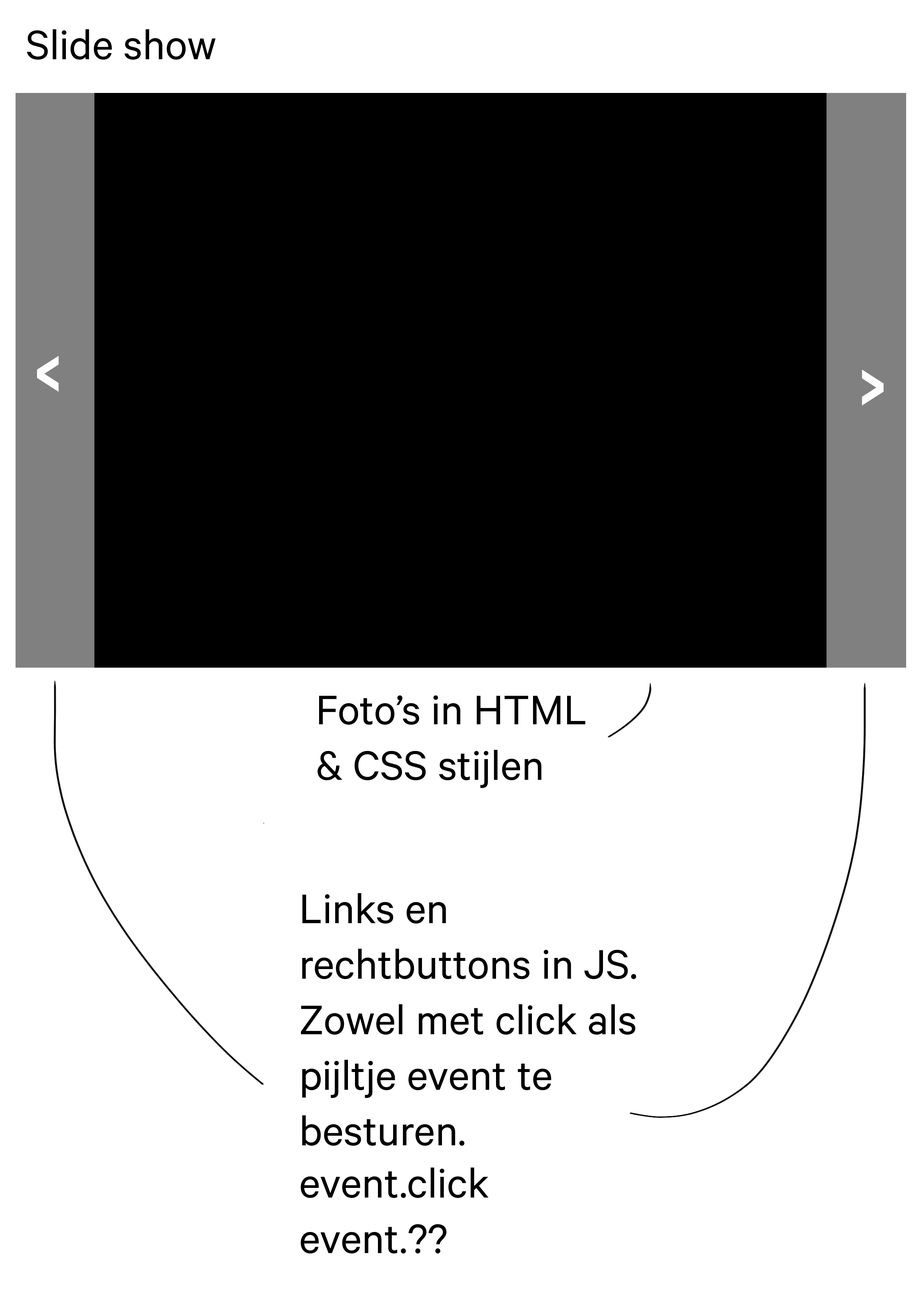
<style>
.page{position:relative;width:918px;height:1299px;background:#ffffff}
.page>*{position:absolute;margin:0}
.t1{font:46.3px "Calibre-Regular";color:#000000}
.t2{font:111.1px "Calibre-Regular";color:#fefefe}
.t3{font:111.2px "Calibre-Regular";color:#fefefe}
</style>
<div class="page">
<p class="t1" style="left:27px;top:29px;width:189px;height:31px">Slide show</p>
<p class="t2" style="left:37px;top:356px;width:22px;height:36px;rotate:-90deg">^</p>
<p class="t3" style="left:862px;top:369px;width:22px;height:36px;rotate:90deg">^</p>
<p class="t1" style="left:318px;top:695px;width:268px;height:93px">Foto’s in HTML &amp; CSS stijlen</p>
<p class="t1" style="left:301px;top:893px;width:335px;height:253px">Links en rechtbuttons in JS.<br>Zowel met click als pijltje event te besturen.</p>
<p class="t1" style="left:301px;top:1167px;width:188px;height:87px">event.click<br>event.??</p>
</div>
